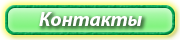
<style>
.page{position:relative;width:180px;height:40px}
.page>*{position:absolute;margin:0}
.t1{font:20px "MyriadPro-BoldIt";color:#ffffff}
</style>
<div class="page">
<p class="t1" style="left:39px;top:12px;width:103px;height:14px">Контакты</p>
</div>
